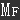
<style>
.page{position:relative;width:20px;height:20px;background:#333333}
.page>*{position:absolute;margin:0}
.t1{font:20px "LiSu";color:#ffffff;font-variant:small-caps}
</style>
<div class="page">
<p class="t1" style="left:1px;top:3px;width:18px;height:13px">Mf</p>
</div>
